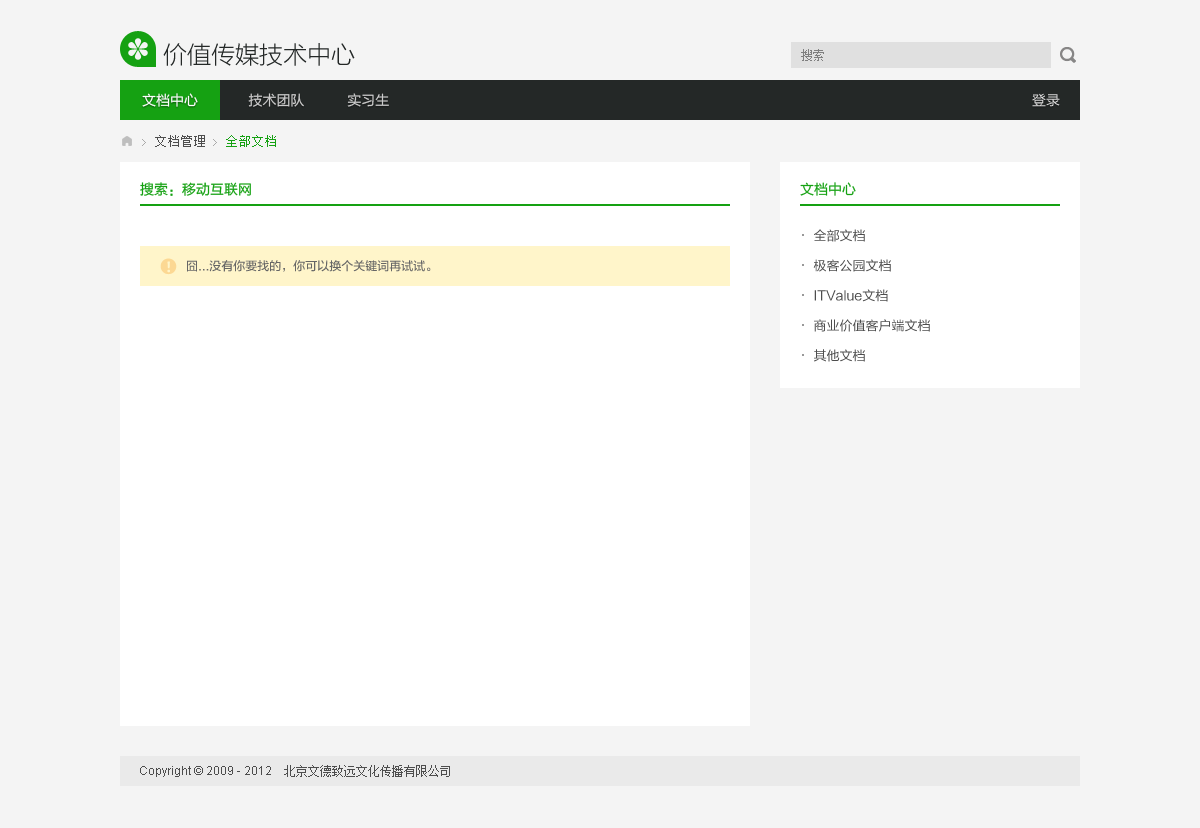
<style>
.page{position:relative;width:1200px;height:828px;background:#f4f4f4}
.page>*{position:absolute;margin:0}
.t1{font:24px "FZLTXHK--GBK1-0";color:#242827}
.t2{font:12px "SimSun";color:#7f7f7f}
.t3{font:14px "FZLTHJW--GB1-0";color:#cccccc}
.t4{font:14px "FZLTHJW--GB1-0";color:#ffffff}
.t5{font:14px "FZLTHJW--GB1-0";color:#dddddd}
.t6{font:13px "SimSun";color:#4d4d4d}
.t7{font:10px "SimSun";color:#aaaaaa}
.t8{font:13px "SimSun";color:#15a112}
.t9{font:14px "FZLTHJW--GB1-0";color:#15a112}
.t10{font:13px/30px "FZLTHJW--GB1-0";color:#4d4d4d}
.t11{font:12px "FZLTZHUNHK--GBK1-0";color:#666666}
.t12{font:12px "ArialMT";color:#4d4d4d}
.t13{font:12px "SimSun";color:#4d4d4d}
</style>
<div class="page">
<p class="t1" style="left:163px;top:43px;width:192px;height:23px">价值传媒技术中心</p>
<p class="t2" style="left:801px;top:49px;width:23px;height:12px">搜索</p>
<p class="t3" style="left:142px;top:93px;width:247px;height:14px"><span class="t4">文档中心             </span>技术团队           实习生</p>
<p class="t5" style="left:1032px;top:93px;width:28px;height:14px">登录</p>
<p class="t6" style="left:142px;top:135px;width:134px;height:12px"><span class="t7">&gt;</span> 文档管理 <span class="t7">&gt;</span><span class="t8"> 全部文档</span></p>
<p class="t9" style="left:140px;top:182px;width:111px;height:14px">搜索：移动互联网</p>
<p class="t9" style="left:800px;top:182px;width:56px;height:14px">文档中心</p>
<p class="t10" style="left:813px;top:229px;width:117px;height:133px">全部文档<br>极客公园文档<br>ITValue文档<br>商业价值客户端文档<br>其他文档</p>
<p class="t11" style="left:187px;top:260px;width:244px;height:12px">囧...没有你要找的，你可以换个关键词再试试。</p>
<p class="t12" style="left:140px;top:765px;width:310px;height:12px">Copyright © 2009 - 2012    <span class="t13">北京文德致远文化传播有限公司</span></p>
</div>
